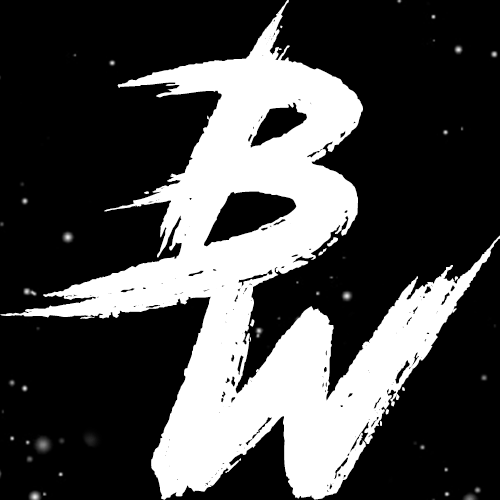
<style>
.page{position:relative;width:500px;height:500px;background:#000000}
.page>*{position:absolute;margin:0}
.t1{font:311.4px "RoadRage";color:#ffffff}
.t2{font:326.9px "RoadRage";color:#ffffff}
</style>
<div class="page">
<p class="t1" style="left:0px;top:0px;width:363px;height:319px">B</p>
<p class="t2" style="left:151px;top:235px;width:350px;height:265px">w</p>
</div>
